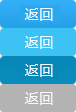
<style>
.page{position:relative;width:76px;height:112px;background:#b3b3b3}
.page>*{position:absolute;margin:0}
.t1{font:14px "MicrosoftYaHei";letter-spacing:0.052em;color:#fafafa}
</style>
<div class="page">
<p class="t1" style="left:25px;top:8px;width:28px;height:13px">返回</p>
<p class="t1" style="left:25px;top:36px;width:28px;height:13px">返回</p>
<p class="t1" style="left:25px;top:64px;width:28px;height:13px">返回</p>
<p class="t1" style="left:25px;top:92px;width:28px;height:13px">返回</p>
</div>
